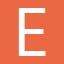
<style>
.page{position:relative;width:64px;height:64px;background:#eb6842}
.page>*{position:absolute;margin:0}
.t1{font:68.8px "PTSans-Regular";letter-spacing:0.04em;color:#ffffff;text-transform:uppercase}
</style>
<div class="page">
<p class="t1" style="left:18px;top:8px;width:28px;height:48px">E</p>
</div>
